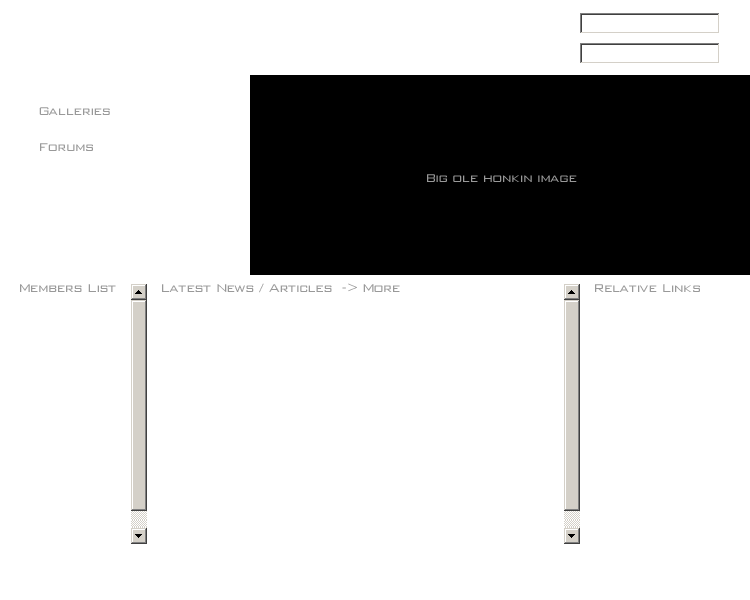
<style>
.page{position:relative;width:750px;height:600px;background:#ffffff}
.page>*{position:absolute;margin:0}
.t1{font:12px/12px "WallStreet";letter-spacing:0.05em;color:#999999}
.t2{font:12px "WallStreet";letter-spacing:0.05em;color:#999999}
</style>
<div class="page">
<p class="t1" style="left:39px;top:107px;width:71px;height:44px">Galleries<br><br><br>Forums</p>
<p class="t2" style="left:427px;top:174px;width:150px;height:8px">Big ole honkin image</p>
<p class="t2" style="left:20px;top:284px;width:96px;height:8px">Members List</p>
<p class="t2" style="left:162px;top:283px;width:238px;height:10px">Latest News / Articles  -&gt; More</p>
<p class="t2" style="left:595px;top:284px;width:105px;height:8px">Relative Links</p>
</div>
